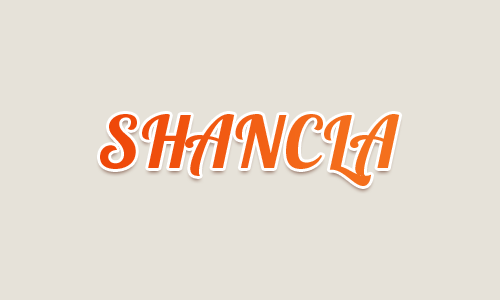
<style>
.page{position:relative;width:500px;height:300px;background:#e6e2d9}
.page>*{position:absolute;margin:0}
.t1{font:72px "LobsterTwo-BoldItalic";color:#f4701d}
</style>
<div class="page">
<p class="t1" style="left:100px;top:114px;width:300px;height:72px">SHANCLA</p>
</div>
